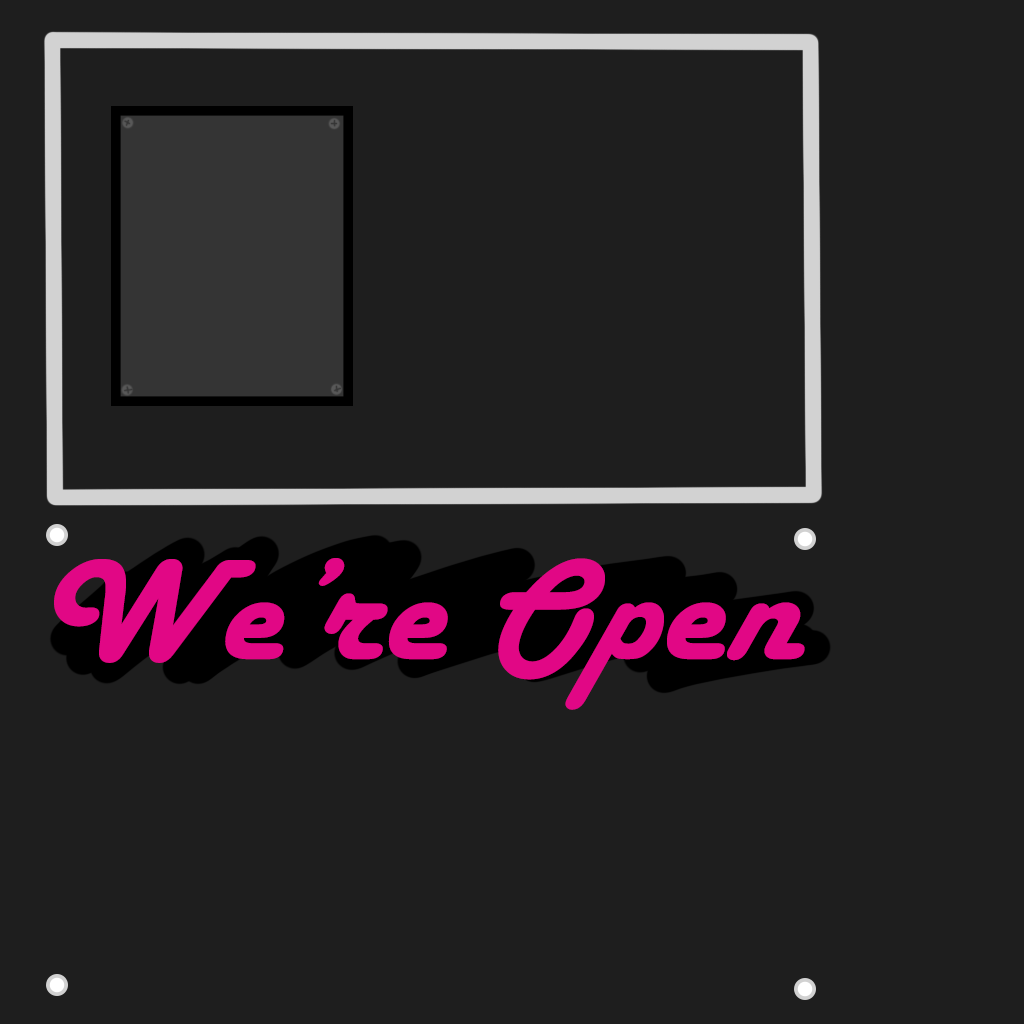
<style>
.page{position:relative;width:1024px;height:1024px;background:#1e1e1e}
.page>*{position:absolute;margin:0}
.t1{font:150px "HarlowSolid";letter-spacing:0.01em;color:#e10785;scale:1.04 1}
</style>
<div class="page">
<p class="t1" style="left:54px;top:558px;width:751px;height:152px">We’re Open</p>
</div>
